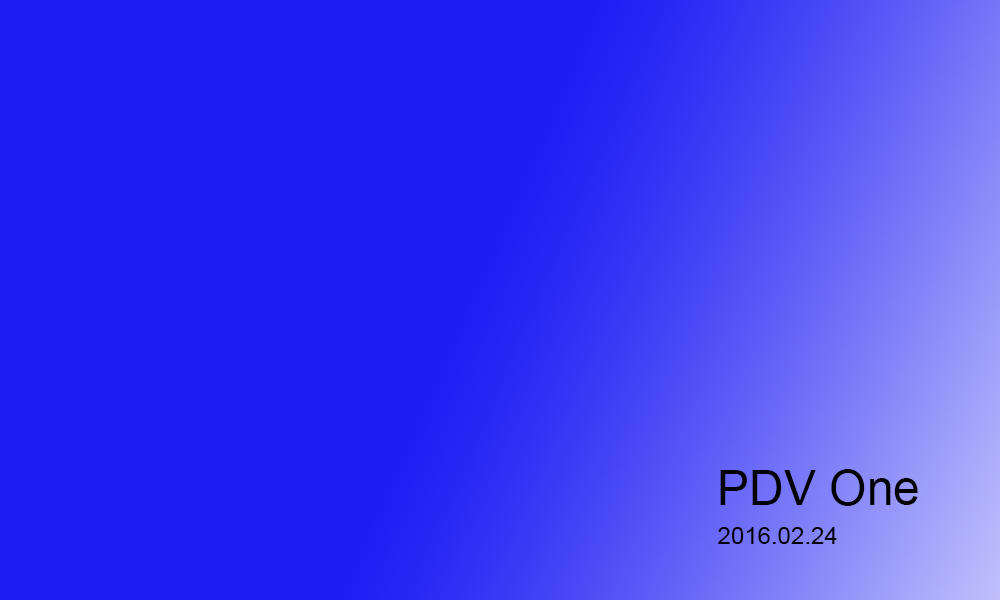
<style>
.page{position:relative;width:1000px;height:600px;background:#1e1ef4}
.page>*{position:absolute;margin:0}
.t1{font:48px "ArialMT";color:#000000}
.t2{font:24px "ArialMT";color:#000000}
</style>
<div class="page">
<p class="t1" style="left:720px;top:469px;width:198px;height:37px">PDV One</p>
<p class="t2" style="left:718px;top:527px;width:119px;height:17px">2016.02.24</p>
</div>
